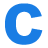
<style>
.page{position:relative;width:48px;height:48px;background:#ffffff}
.page>*{position:absolute;margin:0}
.t1{font:130px "Arial-BoldMT";letter-spacing:-0.02em;color:#197de4}
</style>
<div class="page">
<p class="t1" style="left:5px;top:3px;width:38px;height:42px">c</p>
</div>
